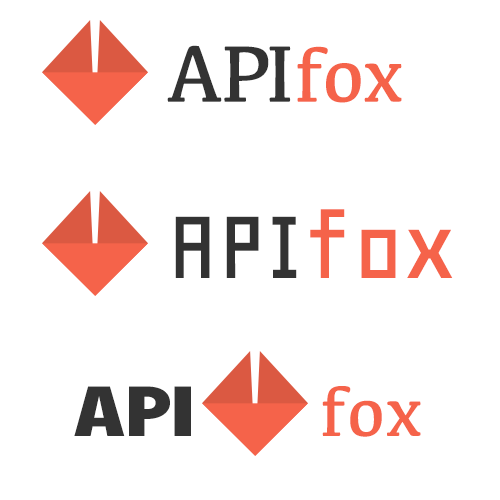
<style>
.page{position:relative;width:500px;height:500px;background:#ffffff}
.page>*{position:absolute;margin:0}
.t1{font:83px "Kefa-Regular";color:#333333}
.t2{font:79px "Kefa-Regular";color:#f5634a}
.t3{font:109px "Geo-Regular";color:#333333}
.t4{font:109px "Geo-Regular";color:#f5634a}
.t5{font:72px "PaytoneOne";color:#333333}
.t6{font:72px "Kefa-Regular";color:#f5634a}
</style>
<div class="page">
<p class="t1" style="left:167px;top:45px;width:235px;height:58px">API<span class="t2">fox</span></p>
<p class="t3" style="left:175px;top:209px;width:278px;height:69px">API<span class="t4">fox</span></p>
<p class="t5" style="left:74px;top:386px;width:347px;height:51px">API         <span class="t6">fox</span></p>
</div>
